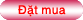
<style>
.page{position:relative;width:83px;height:20px}
.page>*{position:absolute;margin:0}
.t1{font:12px "VNI-Helve";color:#ff0101}
</style>
<div class="page">
<p class="t1" style="left:18px;top:5px;width:48px;height:12px">Ñaët mua</p>
</div>
